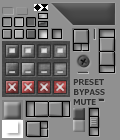
<style>
.page{position:relative;width:120px;height:140px;background:#909090}
.page>*{position:absolute;margin:0}
.t1{font:8.2px "Tahoma-Bold";color:#303030}
</style>
<div class="page">
<p class="t1" style="left:73px;top:79px;width:31px;height:6px">PRESET</p>
<p class="t1" style="left:74px;top:89px;width:31px;height:6px">BYPASS</p>
<p class="t1" style="left:73px;top:99px;width:23px;height:6px">MUTE</p>
</div>
